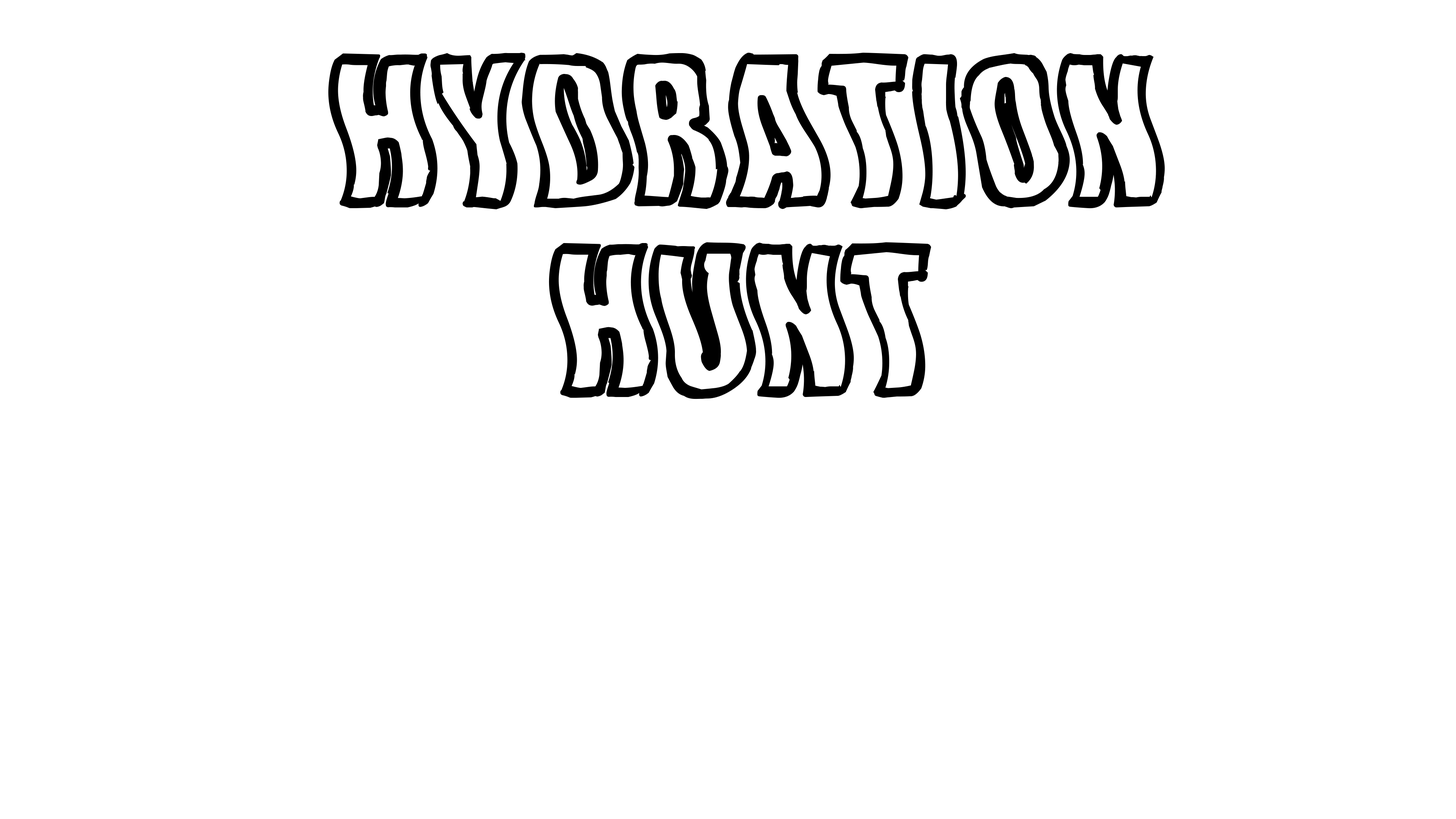
<style>
.page{position:relative;width:1456px;height:819px;background:#ffffff}
.page>*{position:absolute;margin:0}
.t1{font:158px "WishfulWaves";letter-spacing:0.025em;color:#000000}
</style>
<div class="page">
<p class="t1" style="left:328px;top:53px;width:837px;height:346px;text-align:center">Hydration<br>Hunt</p>
</div>
